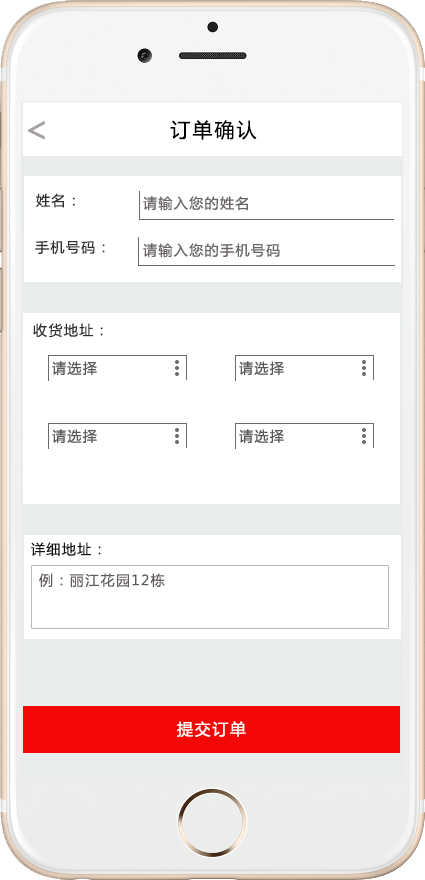
<style>
.page{position:relative;width:425px;height:880px;background:#ffffff}
.page>*{position:absolute;margin:0}
.t1{font:36px "MicrosoftYaHei";letter-spacing:0.1em;color:#a49e9e}
.t2{font:20px "MicrosoftYaHei";letter-spacing:0.1em;color:#000000}
.t3{font:14px "MicrosoftYaHei";letter-spacing:0.1em;color:#302e2e}
.t4{font:14px "MicrosoftYaHei";letter-spacing:0.1em;color:#131010}
.t5{font:14px "MicrosoftYaHei";letter-spacing:0.1em;color:#625b5b}
.t6{font:16px "MicrosoftYaHei";letter-spacing:0.1em;color:#ffffff}
</style>
<div class="page">
<p class="t1" style="left:28px;top:120px;width:17px;height:20px">&lt;</p>
<p class="t2" style="left:170px;top:120px;width:87px;height:20px">订单确认</p>
<p class="t3" style="left:36px;top:193px;width:39px;height:15px">姓名：</p>
<p class="t3" style="left:35px;top:240px;width:70px;height:15px">手机号码：</p>
<p class="t3" style="left:33px;top:323px;width:70px;height:15px">收货地址：</p>
<p class="t4" style="left:31px;top:542px;width:70px;height:15px">详细地址：</p>
<p class="t5" style="left:39px;top:573px;width:126px;height:15px">例：丽江花园12栋</p>
<p class="t6" style="left:177px;top:721px;width:69px;height:16px">提交订单</p>
</div>
